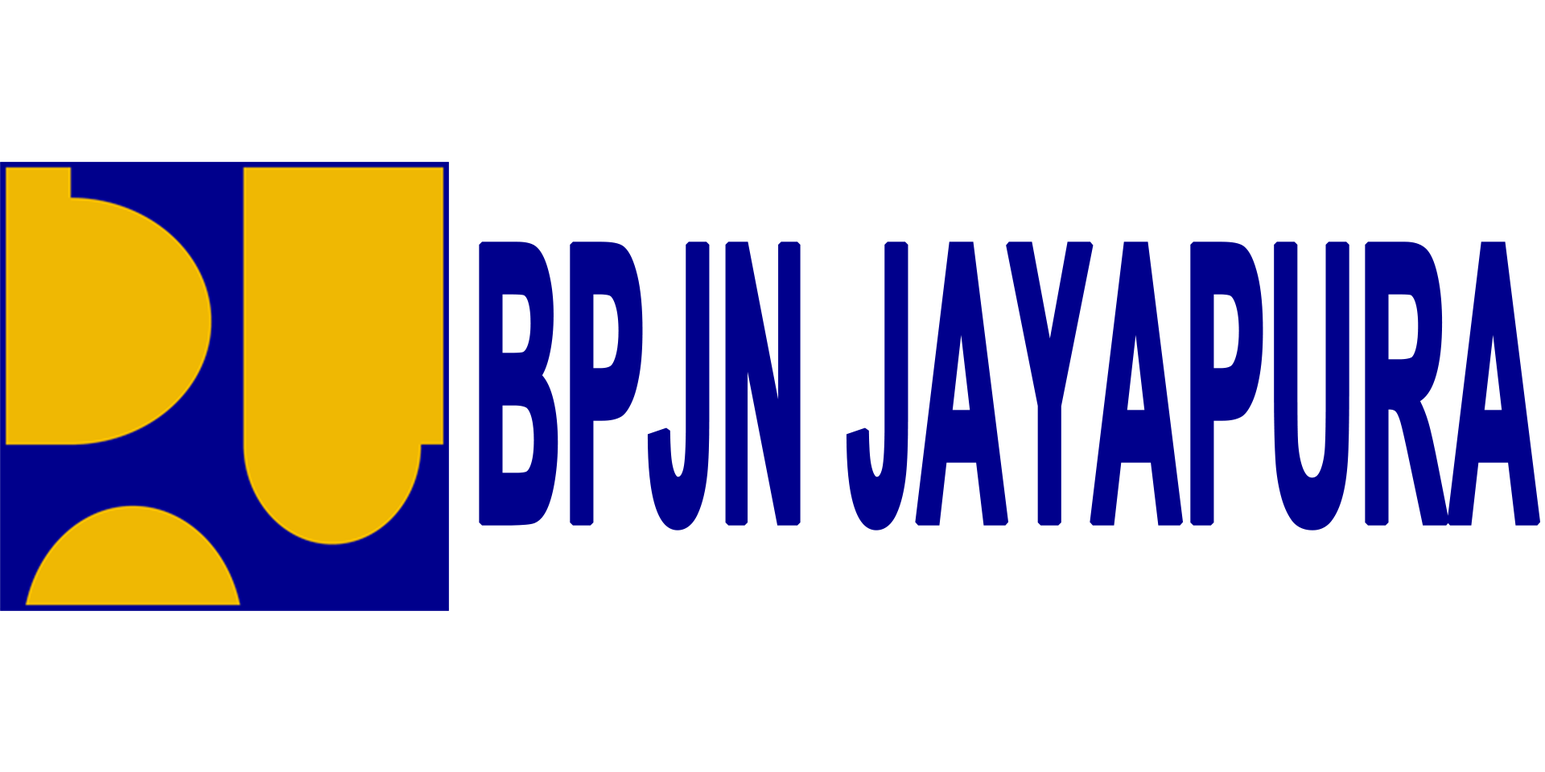
<style>
.page{position:relative;width:1545px;height:772px;background:#ffffff}
.page>*{position:absolute;margin:0}
.t1{font:387.1px "Arial-BoldMT";color:#00008c;font-weight:bold;scale:0.31 1}
</style>
<div class="page">
<p class="t1" style="left:479px;top:241px;width:1061px;height:289px">BPJN JAYAPURA</p>
</div>
